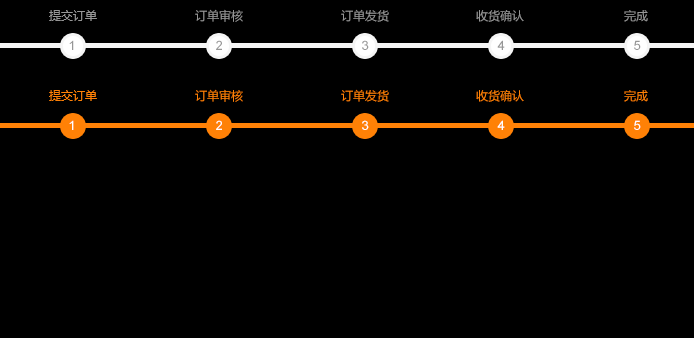
<style>
.page{position:relative;width:694px;height:338px;background:#000000}
.page>*{position:absolute;margin:0}
.t1{font:12px "MicrosoftYaHei";color:#969696}
.t2{font:13px "ArialMT";color:#969696}
.t3{font:12px "MicrosoftYaHei";color:#ff8106}
.t4{font:13px "ArialMT";color:#ffffff}
</style>
<div class="page">
<p class="t1" style="left:49px;top:10px;width:48px;height:11px">提交订单</p>
<p class="t1" style="left:195px;top:9px;width:48px;height:13px">订单审核</p>
<p class="t1" style="left:341px;top:9px;width:48px;height:13px">订单发货</p>
<p class="t1" style="left:476px;top:10px;width:48px;height:12px">收货确认</p>
<p class="t1" style="left:624px;top:10px;width:24px;height:12px">完成</p>
<p class="t2" style="left:69px;top:40px;width:5px;height:10px">1</p>
<p class="t2" style="left:216px;top:40px;width:6px;height:10px">2</p>
<p class="t2" style="left:362px;top:40px;width:7px;height:10px">3</p>
<p class="t2" style="left:497px;top:40px;width:8px;height:10px">4</p>
<p class="t2" style="left:634px;top:40px;width:7px;height:10px">5</p>
<p class="t3" style="left:195px;top:89px;width:48px;height:13px">订单审核</p>
<p class="t3" style="left:341px;top:89px;width:48px;height:13px">订单发货</p>
<p class="t3" style="left:49px;top:90px;width:48px;height:11px">提交订单</p>
<p class="t3" style="left:476px;top:90px;width:48px;height:12px">收货确认</p>
<p class="t3" style="left:624px;top:90px;width:24px;height:12px">完成</p>
<p class="t4" style="left:69px;top:120px;width:5px;height:10px">1</p>
<p class="t4" style="left:216px;top:120px;width:6px;height:10px">2</p>
<p class="t4" style="left:362px;top:120px;width:7px;height:10px">3</p>
<p class="t4" style="left:497px;top:120px;width:8px;height:10px">4</p>
<p class="t4" style="left:634px;top:120px;width:7px;height:10px">5</p>
</div>
